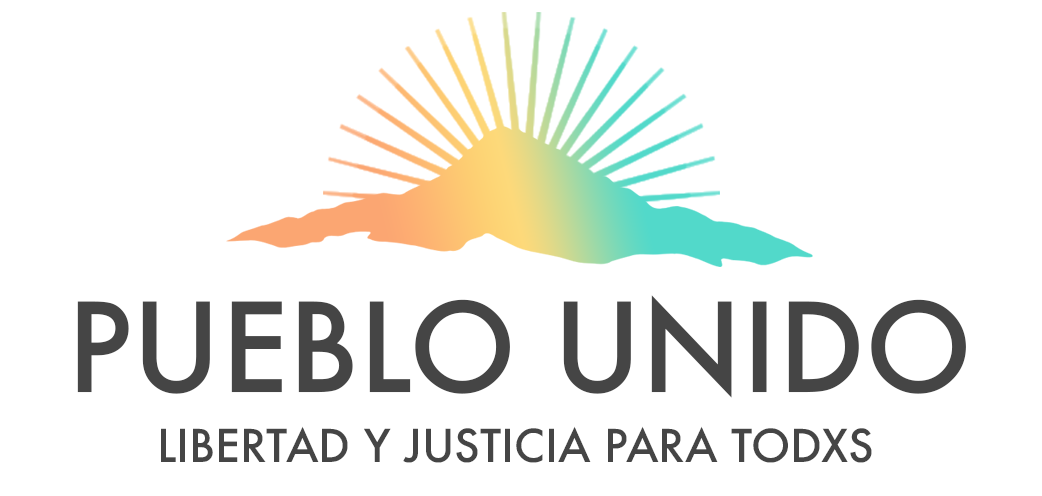
<style>
.page{position:relative;width:1042px;height:496px;background:#ffffff}
.page>*{position:absolute;margin:0}
.t1{font:120px "Futura-Medium";color:#454545}
.t2{font:44px "Futura-Medium";color:#454545}
</style>
<div class="page">
<p class="t1" style="left:77px;top:295px;width:889px;height:103px">PUEBLO UNIDO</p>
<p class="t2" style="left:161px;top:426px;width:711px;height:37px">LIBERTAD Y JUSTICIA PARA TODXS</p>
</div>
